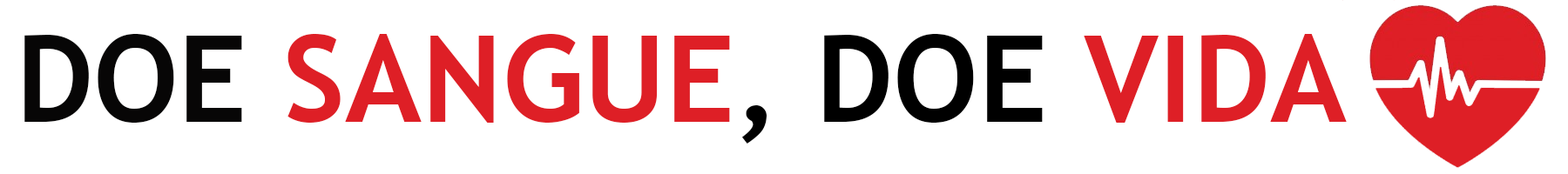
<style>
.page{position:relative;width:1568px;height:174px;background:#ffffff}
.page>*{position:absolute;margin:0}
.t1{font:121px "TrebuchetMS-Bold";color:#de1f26}
.t2{font:121px "TrebuchetMS-Bold";color:#070606}
.t3{font:121px "TrebuchetMS-Bold";color:#000000}
</style>
<div class="page">
<p class="t1" style="left:24px;top:34px;width:1323px;height:110px"><span class="t2">DOE </span>SANGUE<span class="t3">, DOE </span>VIDA</p>
</div>
